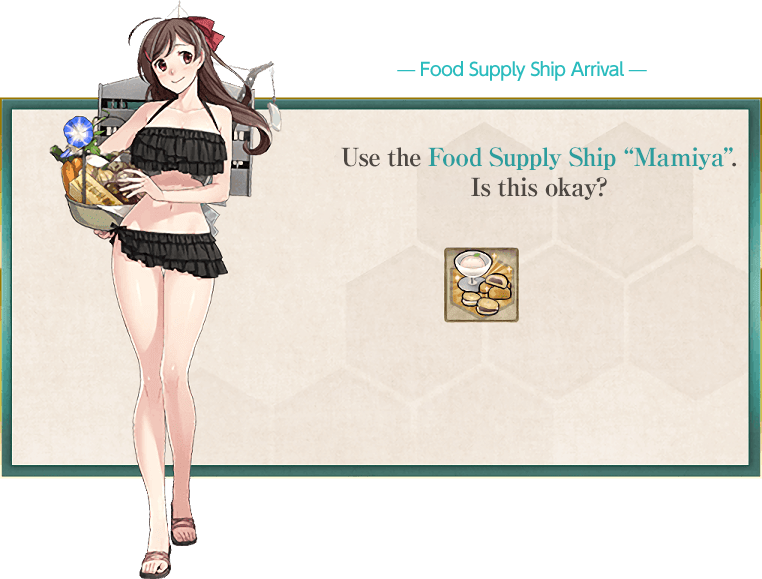
<style>
.page{position:relative;width:762px;height:579px;background:#ffffff}
.page>*{position:absolute;margin:0}
.t1{font:18px "UDShinGoPro-Medium";letter-spacing:-0.04em;color:#2bbcbe}
.t2{font:25px "RyuminPro-ExBold";letter-spacing:-0.04em;color:#2b9e9e}
.t3{font:25px "RyuminPro-ExBold";letter-spacing:-0.04em;color:#4d4742}
</style>
<div class="page">
<p class="t1" style="left:397px;top:61px;width:250px;height:20px">— Food Supply Ship Arrival —</p>
<p class="t2" style="left:341px;top:147px;width:395px;height:53px;text-align:center"><span class="t3">Use the </span>Food Supply Ship “Mamiya”<span class="t3">.<br>Is this okay?</span></p>
</div>
